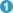
<style>
.page{position:relative;width:13px;height:13px;background:#259bc7}
.page>*{position:absolute;margin:0}
.t1{font:10px "ArialMT";letter-spacing:-0.075em;color:#ffffff;font-weight:bold}
</style>
<div class="page">
<p class="t1" style="left:4px;top:2px;width:3px;height:9px">1</p>
</div>
